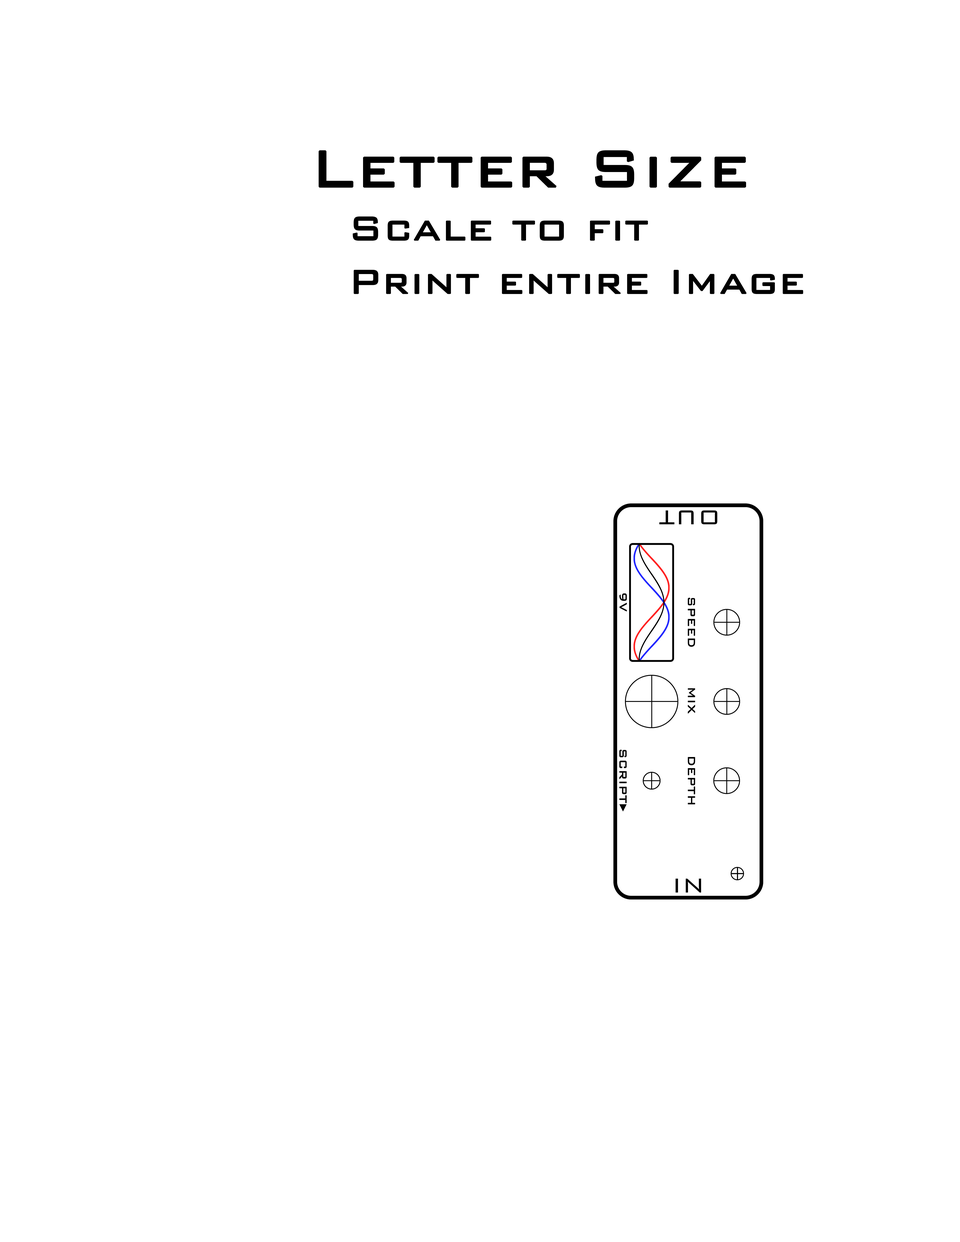
<style>
.page{position:relative;width:960px;height:1242px;background:#ffffff}
.page>*{position:absolute;margin:0}
.t1{font:44.5px "BankGothic-Light";color:#000000;font-weight:bold}
.t2{font:68.7px "BankGothic-Light";color:#000000;font-weight:bold}
</style>
<div class="page">
<p class="t1" style="left:319px;top:150px;width:484px;height:144px"><span class="t2">Letter Size<br></span>     Scale to fit<br>     Print entire Image</p>
</div>
